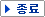
<style>
.page{position:relative;width:45px;height:17px;background:#ffffff}
.page>*{position:absolute;margin:0}
.t1{font:11px "Dotum";color:#003297;font-weight:bold}
</style>
<div class="page">
<p class="t1" style="left:17px;top:4px;width:22px;height:10px">종료</p>
</div>
